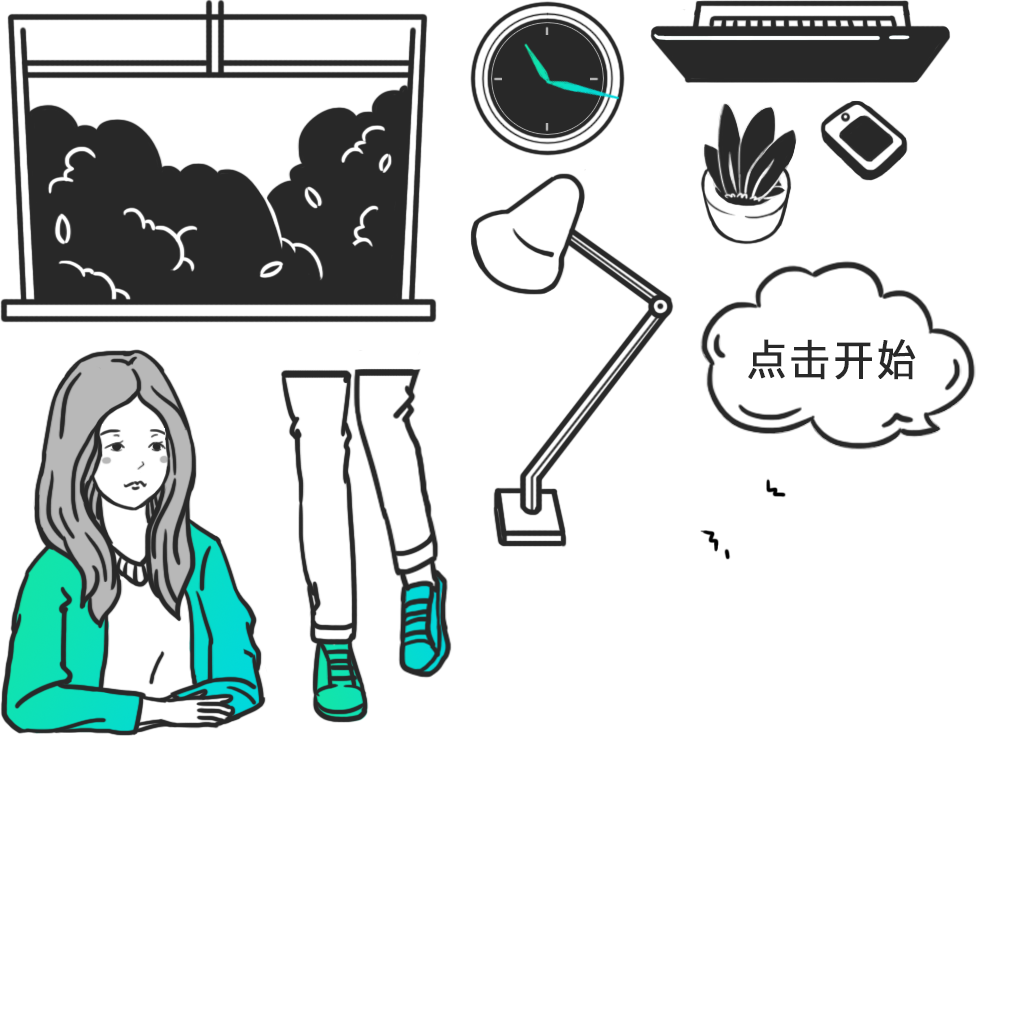
<style>
.page{position:relative;width:1024px;height:1024px;background:#ffffff}
.page>*{position:absolute;margin:0}
.t1{font:42.2px "FZLTHK--GBK1-0";letter-spacing:0.1em;color:#282828;font-weight:bold;scale:0.91 1}
</style>
<div class="page">
<p class="t1" style="left:748px;top:339px;width:168px;height:41px">点击开始</p>
</div>
